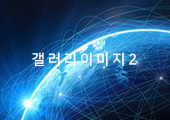
<style>
.page{position:relative;width:170px;height:120px}
.page>*{position:absolute;margin:0}
.t1{font:14.5px "NanumSquareB";letter-spacing:0.2em;color:#ffffff}
</style>
<div class="page">
<p class="t1" style="left:32px;top:52px;width:105px;height:15px">갤러리이미지2</p>
</div>
